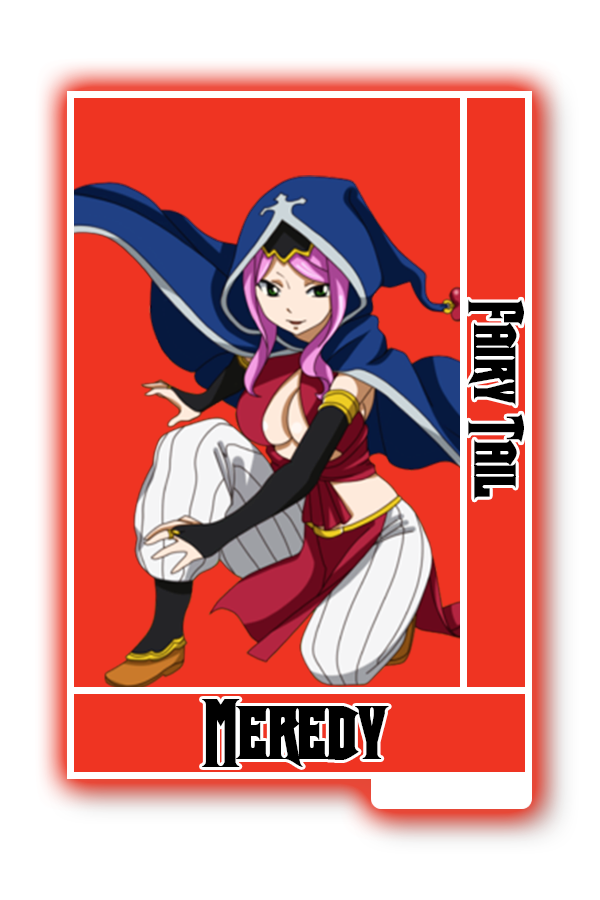
<style>
.page{position:relative;width:600px;height:900px;background:#ffffff}
.page>*{position:absolute;margin:0}
.t1{font:61.5px "Crown-Title";color:#000000}
.t2{font:79.9px "Crown-Title";color:#000000}
</style>
<div class="page">
<p class="t1" style="left:468px;top:299px;width:56px;height:201px;rotate:90deg">Fairy Tail</p>
<p class="t2" style="left:202px;top:699px;width:187px;height:68px">Meredy</p>
</div>
